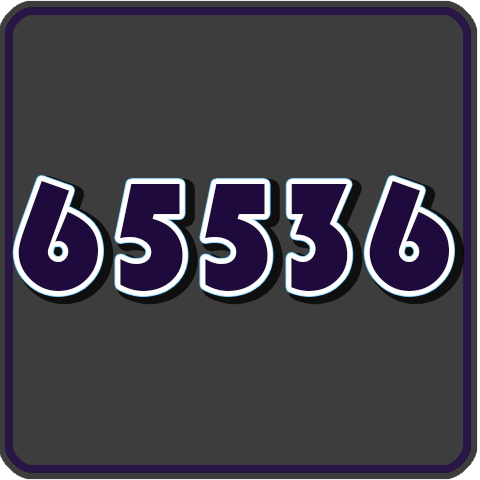
<style>
.page{position:relative;width:480px;height:480px;background:#3d3d3d}
.page>*{position:absolute;margin:0}
.t1{font:155.6px "Bauhaus93";color:#1e0a3c}
</style>
<div class="page">
<p class="t1" style="left:18px;top:180px;width:81px;height:111px">6</p>
<p class="t1" style="left:120px;top:184px;width:63px;height:107px">5</p>
<p class="t1" style="left:205px;top:184px;width:63px;height:107px">5</p>
<p class="t1" style="left:291px;top:184px;width:57px;height:107px">3</p>
<p class="t1" style="left:369px;top:180px;width:81px;height:111px">6</p>
</div>
